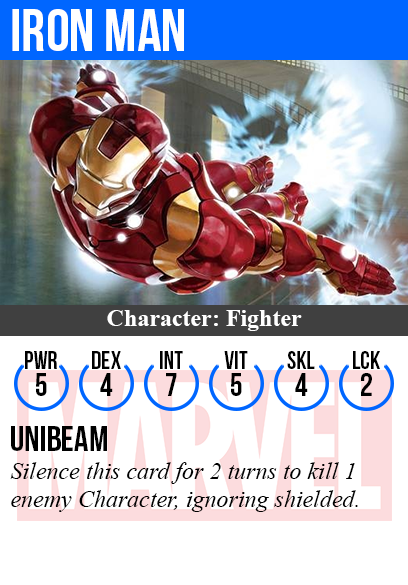
<style>
.page{position:relative;width:408px;height:585px;background:#ffffff}
.page>*{position:absolute;margin:0}
.t1{font:60px "BebasNeue";color:#ffffff}
.t2{font:24px "TimesNewRomanPS-BoldMT";color:#ffffff}
.t3{font:25px "BebasNeue";color:#000000}
.t4{font:32px "BebasNeue";color:#000000}
.t5{font:36px "BebasNeue";color:#000000}
.t6{font:24px "TimesNewRomanPS-ItalicMT";color:#000000}
</style>
<div class="page">
<p class="t1" style="left:12px;top:9px;width:172px;height:42px">iron man</p>
<p class="t2" style="left:107px;top:310px;width:195px;height:21px">Character: Fighter</p>
<p class="t3" style="left:25px;top:351px;width:32px;height:18px">PWR</p>
<p class="t3" style="left:92px;top:351px;width:29px;height:18px">dex</p>
<p class="t3" style="left:160px;top:351px;width:23px;height:18px">int</p>
<p class="t3" style="left:224px;top:351px;width:24px;height:18px">vit</p>
<p class="t3" style="left:287px;top:351px;width:28px;height:18px">skl</p>
<p class="t3" style="left:353px;top:351px;width:27px;height:18px">lck</p>
<p class="t4" style="left:36px;top:373px;width:11px;height:23px">5</p>
<p class="t4" style="left:100px;top:373px;width:13px;height:23px">4</p>
<p class="t4" style="left:166px;top:373px;width:11px;height:23px">7</p>
<p class="t4" style="left:231px;top:373px;width:11px;height:23px">5</p>
<p class="t4" style="left:295px;top:373px;width:13px;height:23px">4</p>
<p class="t4" style="left:361px;top:373px;width:11px;height:23px">2</p>
<p class="t5" style="left:11px;top:426px;width:96px;height:25px">unibeam</p>
<p class="t6" style="left:10px;top:462px;width:348px;height:50px">Silence this card for 2 turns to kill 1<br>enemy Character, ignoring shielded.</p>
</div>
